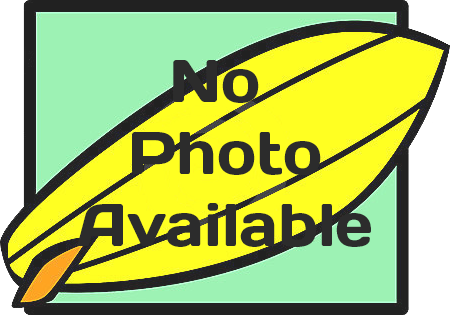
<style>
.page{position:relative;width:450px;height:315px;background:#ffff22}
.page>*{position:absolute;margin:0}
.t1{font:60px "Days";color:#2c2c2c}
</style>
<div class="page">
<p class="t1" style="left:77px;top:60px;width:294px;height:187px;text-align:center">No <br>Photo<br>Available</p>
</div>
